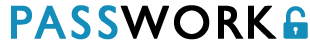
<style>
.page{position:relative;width:310px;height:45px;background:#ffffff}
.page>*{position:absolute;margin:0}
.t1{font:45.4px "Gibson-Regular";letter-spacing:0.075em;color:#158dbb;font-weight:bold}
.t2{font:45.4px "Gibson-Regular";letter-spacing:0.075em;color:#000000;font-weight:bold}
</style>
<div class="page">
<p class="t1" style="left:11px;top:5px;width:266px;height:35px">PASS<span class="t2">WORK</span></p>
</div>
